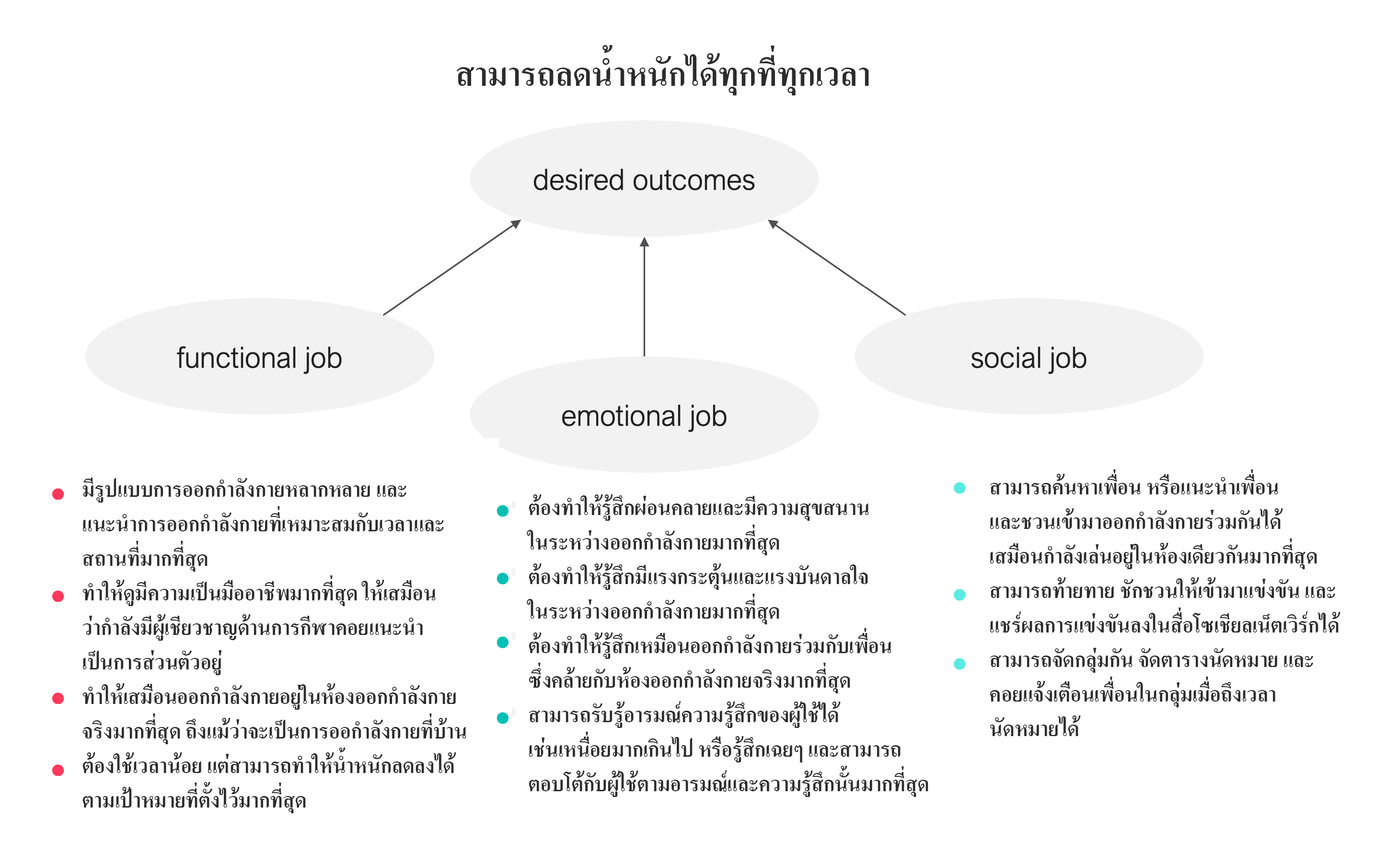
<style>
.page{position:relative;width:1376px;height:867px;background:#ffffff}
.page>*{position:absolute;margin:0}
.t1{font:28.8px "AngsanaUPC-Bold";color:#2d2c2c}
</style>
<div class="page">
<p class="t1" style="left:990px;top:469px;width:351px;height:267px">สามารถค้นหาเพื่อน หรือแนะนำเพื่อน<br>และชวนเข้ามาออกกำลังกายร่วมกันได้<br>เสมือนกำลังเล่นอยู่ในห้องเดียวกันมากที่สุด<br>สามารถท้ายทาย ชักชวนให้เข้ามาแข่งขัน และ<br>แชร์ผลการแข่งขันลงในสื่อโซเชียลเน็ตเวิร์กได้<br>สามารถจัดกลุ่มกัน จัดตารางนัดหมาย และ<br>คอยแจ้งเตือนเพื่อนในกลุ่มเมื่อถึงเวลา<br>นัดหมายได้</p>
<p class="t1" style="left:82px;top:477px;width:384px;height:336px">มีรูปแบบการออกกำลังกายหลากหลาย และ<br>แนะนำการออกกำลังกายที่เหมาะสมกับเวลาและ<br>สถานที่มากที่สุด<br>ทำให้ดูมีความเป็นมืออาชีพมากที่สุด ให้เสมือน<br>ว่ากำลังมีผู้เชียวชาญด้านการกีฬาคอยแนะนำ<br>เป็นการส่วนตัวอยู่<br>ทำให้เสมือนออกกำลังกายอยู่ในห้องออกกำลังกาย<br>จริงมากที่สุด ถึงแม้ว่าจะเป็นการออกำลังกายที่บ้าน<br>ต้องใช้เวลาน้อย แต่สามารถทำให้น้ำหนักลดลงได้<br>ตามเป้าหมายที่ตั้งไว้มากที่สุด</p>
<p class="t1" style="left:527px;top:494px;width:401px;height:303px">ต้องทำให้รู้สึกผ่อนคลายและมีความสุขสนาน<br>ในระหว่างออกกำลังกายมากที่สุด<br>ต้องทำให้รู้สึกมีแรงกระตุ้นและแรงบันดาลใจ<br>ในระหว่างออกกำลังกายมากที่สุด<br>ต้องทำให้รู้สึกเหมือนออกกำลังกายร่วมกับเพื่อน<br>ซึ่งคล้ายกับห้องออกกำลังกายจริงมากที่สุด<br>สามารถรับรู้อารมณ์ความรู้สึกของผู้ใช้ได้ <br>เช่นเหนื่อยมากเกินไป หรือรู้สึกเฉยๆ และสามารถ<br>ตอบโต้กับผู้ใช้ตามอารมณ์และความรู้สึกนั้นมากที่สุด</p>
</div>
